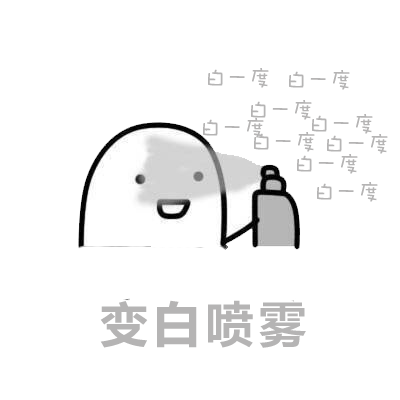
<style>
.page{position:relative;width:400px;height:400px;background:#ffffff}
.page>*{position:absolute;margin:0}
.t1{font:24px "DFPWaWaW5";letter-spacing:-0.05em;color:#b5b4b4}
.t2{font:48px "MicrosoftYaHei-Bold";letter-spacing:0.1em;color:#b5b4b4}
</style>
<div class="page">
<p class="t1" style="left:208px;top:68px;width:61px;height:20px">白一度</p>
<p class="t1" style="left:289px;top:70px;width:61px;height:20px">白一度</p>
<p class="t1" style="left:251px;top:100px;width:61px;height:20px">白一度</p>
<p class="t1" style="left:203px;top:118px;width:61px;height:20px">白一度</p>
<p class="t1" style="left:312px;top:114px;width:61px;height:20px">白一度</p>
<p class="t1" style="left:254px;top:132px;width:61px;height:20px">白一度</p>
<p class="t1" style="left:327px;top:134px;width:61px;height:20px">白一度</p>
<p class="t1" style="left:297px;top:154px;width:61px;height:20px">白一度</p>
<p class="t1" style="left:317px;top:182px;width:61px;height:20px">白一度</p>
<p class="t2" style="left:100px;top:300px;width:206px;height:48px">变白喷雾</p>
</div>
